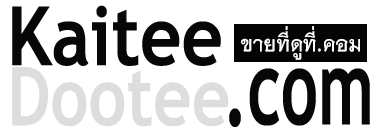
<style>
.page{position:relative;width:383px;height:131px;background:#ffffff}
.page>*{position:absolute;margin:0}
.t1{font:81.6px "TrebuchetMS-Bold";color:#080808;scale:0.88 1}
.t2{font:31px "THNiramitAS-Bold";color:#fdfdfc;scale:0.91 1}
.t3{font:105.3px "TrebuchetMS-Bold";color:#080808;scale:0.62 1}
</style>
<div class="page">
<p class="t1" style="left:12px;top:5px;width:209px;height:61px">Kaitee</p>
<p class="t2" style="left:241px;top:26px;width:119px;height:34px">ขายที่ดูที่.คอม</p>
<p class="t3" style="left:229px;top:68px;width:141px;height:59px">.com</p>
</div>
